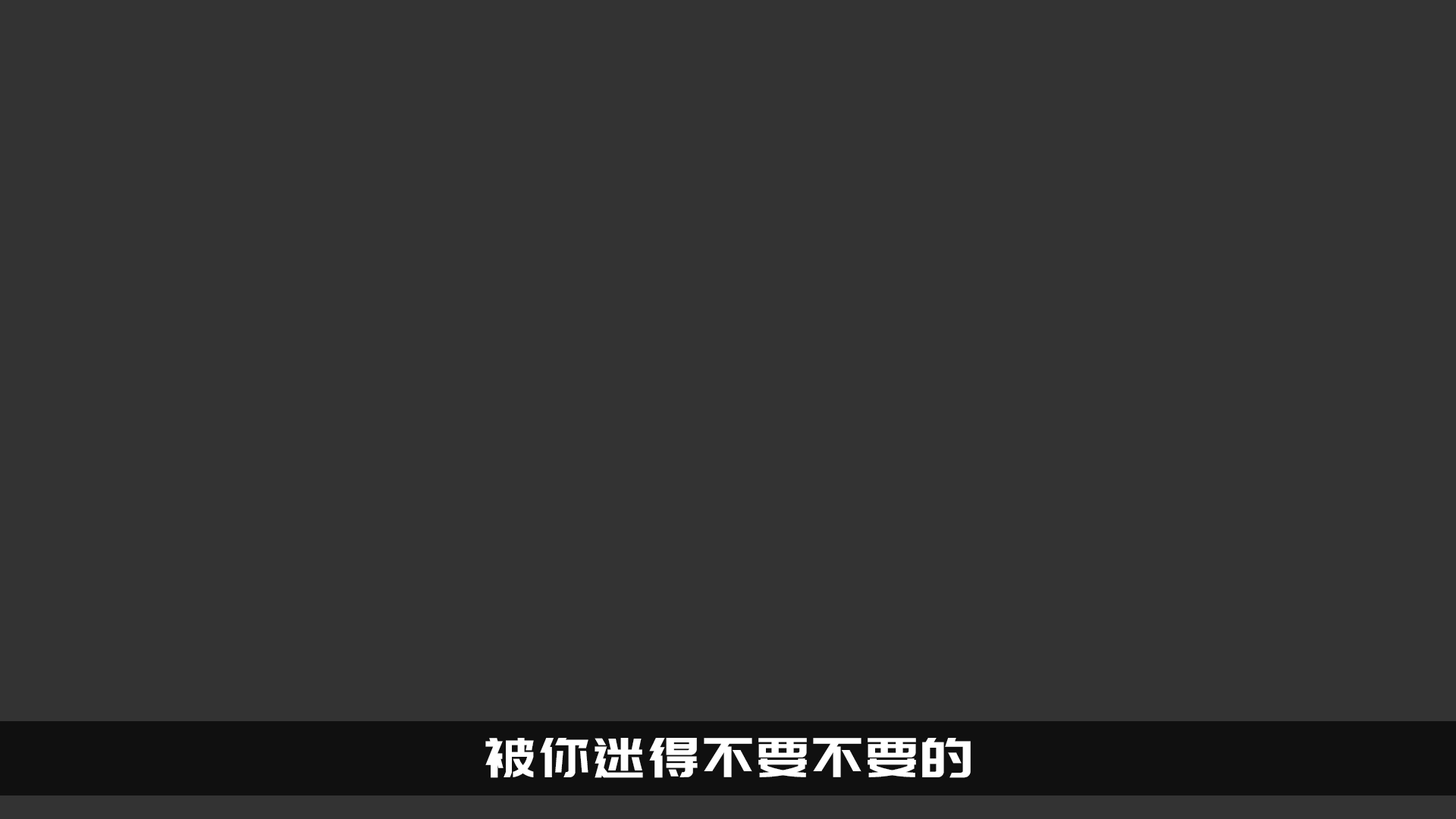
<style>
.page{position:relative;width:1456px;height:819px;background:#333333}
.page>*{position:absolute;margin:0}
.t1{font:54.6px "PangMenZhengDao-3";color:#ffffff}
</style>
<div class="page">
<p class="t1" style="left:485px;top:738px;width:486px;height:40px">被你迷得不要不要的</p>
</div>
